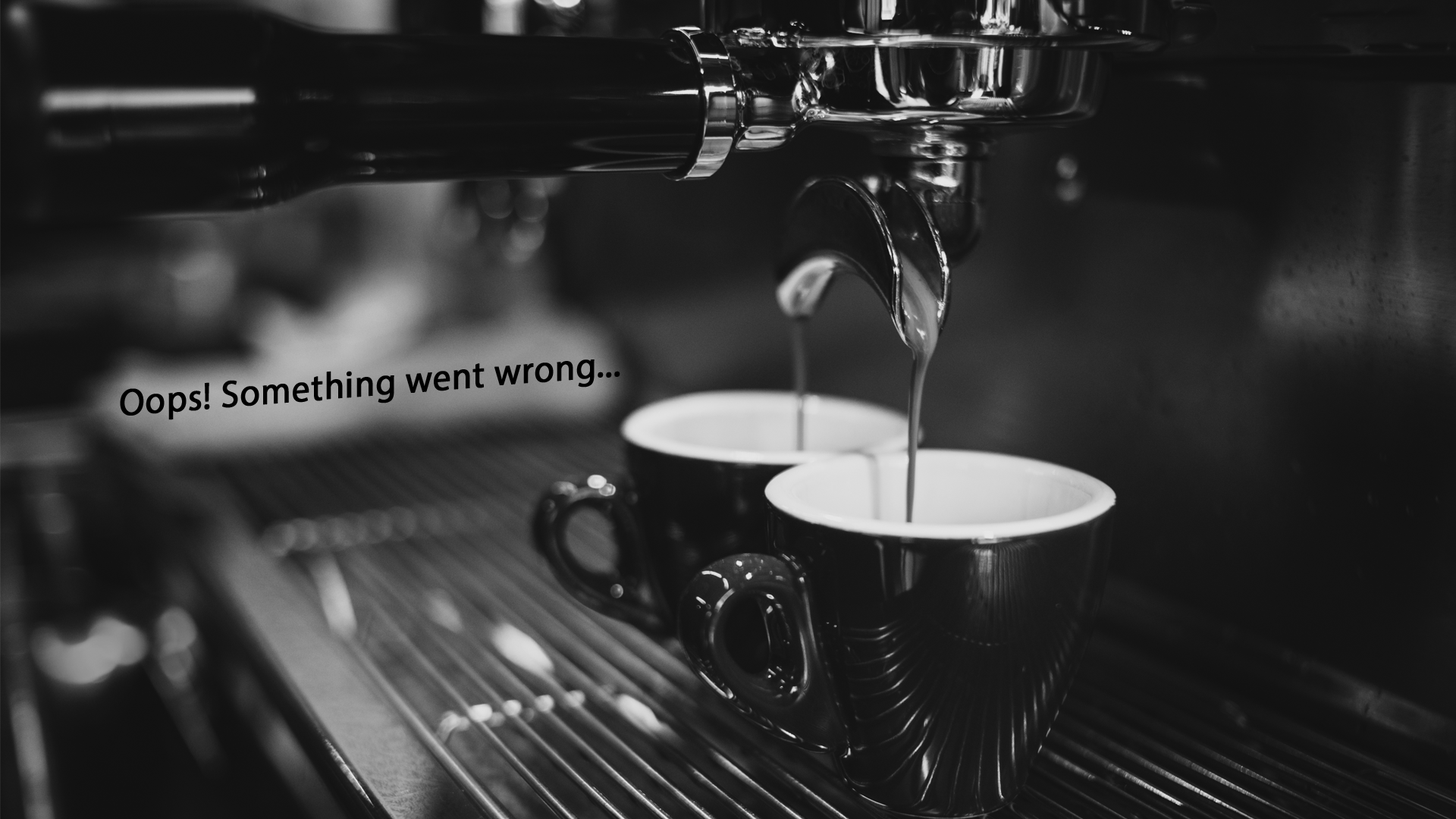
<style>
.page{position:relative;width:1456px;height:819px}
.page>*{position:absolute;margin:0}
.t1{font:9.1px "MyriadPro-Regular";color:#000000;font-weight:bold;scale:0.96 1}
</style>
<div class="page">
<p class="t1" style="left:120px;top:359px;width:500px;height:61px;rotate:-5deg">Oops! Something went wrong...</p>
</div>
